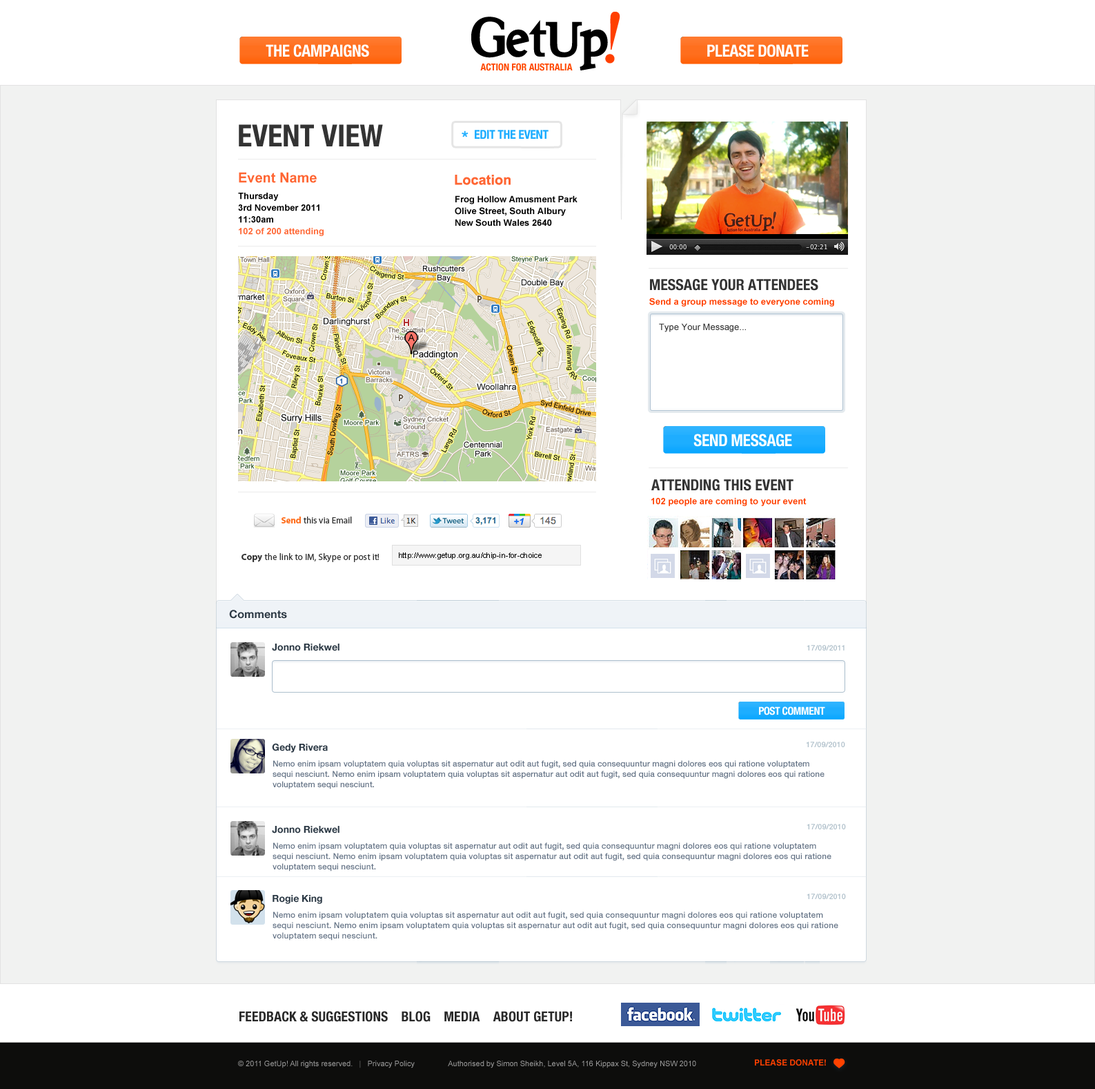
<style>
.page{position:relative;width:1095px;height:1089px;background:#ffffff}
.page>*{position:absolute;margin:0}
.t1{font:16.6px "HelveticaNeue-CondensedBold";letter-spacing:-0.025em;color:#ffffff;text-transform:uppercase}
.t2{font:9.7px "HelveticaNeue-CondensedBold";color:#ff4800;text-transform:uppercase}
.t3{font:30.4px "HelveticaNeue-CondensedBold";color:#333333;text-transform:uppercase}
.t4{font:16.6px "HelveticaNeue-CondensedBold";letter-spacing:-0.025em;color:#26b0ff;text-transform:uppercase}
.t5{font:12.4px "HelveticaNeue-CondensedBold";letter-spacing:-0.025em;color:#1eadff;text-transform:uppercase}
.t6{font:9px/11.7px "Arial-BoldMT";color:#000000}
.t7{font:13.8px "Arial-BoldMT";color:#ff6633}
.t8{font:9px/16.6px "Arial-BoldMT";color:#000000}
.t9{font:9px/11.7px "Arial-BoldMT";color:#ff6633}
.t10{font:15.2px "HelveticaNeue-CondensedBold";color:#333333;text-transform:uppercase}
.t11{font:9px "Arial-BoldMT";color:#ff4000}
.t12{font:9px "ArialMT";color:#333333}
.t13{font:9px "MyriadPro-Regular";letter-spacing:0.01em;color:#333333}
.t14{font:9px "MyriadPro-Bold";letter-spacing:0.01em;color:#ff6f1e}
.t15{font:9px "MyriadPro-Bold";letter-spacing:0.01em;color:#333333}
.t16{font:7.6px "ArialMT";letter-spacing:0.01em;color:#000000}
.t17{font:11px "HelveticaNeue-Bold";color:#2c3945}
.t18{font:9.7px "HelveticaNeue-Bold";color:#2c3945}
.t19{font:7.6px "HelveticaNeue-Medium";color:#acbdc8}
.t20{font:10.8px "HelveticaNeue-CondensedBold";letter-spacing:-0.025em;color:#ffffff;text-transform:uppercase}
.t21{font:8.3px/10.4px "HelveticaNeue-Medium";color:#627184}
.t22{font:13.8px "HelveticaNeue-CondensedBold";color:#292929;text-transform:uppercase}
.t23{font:7.6px "ArialMT";color:#999999}
.t24{font:7.6px "ArialMT";color:#666666}
.t25{font:8.3px "Arial-BoldMT";color:#ff4000;text-transform:uppercase}
</style>
<div class="page">
<p class="t1" style="left:266px;top:44px;width:103px;height:13px">The campaigns</p>
<p class="t1" style="left:708px;top:44px;width:101px;height:13px">Please Donate</p>
<p class="t2" style="left:480px;top:63px;width:93px;height:8px">Action for Australia</p>
<p class="t3" style="left:239px;top:124px;width:144px;height:22px">event view</p>
<p class="t4" style="left:462px;top:130px;width:7px;height:7px">*</p>
<p class="t5" style="left:475px;top:130px;width:74px;height:9px">edit the event</p>
<p class="t6" style="left:238px;top:172px;width:86px;height:64px"><span class="t7">Event Name<br></span><span class="t8">Thursday<br></span>3rd November 2011<br>11:30am<br><span class="t9">102 of 200 attending</span></p>
<p class="t7" style="left:455px;top:175px;width:56px;height:10px">Location</p>
<p class="t6" style="left:455px;top:195px;width:123px;height:31px">Frog Hollow Amusment Park<br>Olive Street, South Albury<br>New South Wales 2640</p>
<p class="t10" style="left:650px;top:279px;width:169px;height:12px">message your attendees</p>
<p class="t11" style="left:650px;top:298px;width:185px;height:8px">Send a group message to everyone coming</p>
<p class="t12" style="left:659px;top:323px;width:87px;height:9px">Type Your Message...</p>
<p class="t1" style="left:694px;top:433px;width:98px;height:14px">send message</p>
<p class="t10" style="left:652px;top:479px;width:142px;height:12px">ATTENDING this event</p>
<p class="t11" style="left:652px;top:498px;width:155px;height:8px">102 people are coming to your event</p>
<p class="t13" style="left:282px;top:516px;width:70px;height:7px"><span class="t14">Send </span>this via Email</p>
<p class="t13" style="left:242px;top:553px;width:137px;height:9px"><span class="t15">Copy</span> the link to IM, Skype or post it!</p>
<p class="t16" style="left:399px;top:552px;width:143px;height:7px">http://www.getup.org.au/chip-in-for-choice</p>
<p class="t17" style="left:229px;top:609px;width:58px;height:9px">Comments</p>
<p class="t18" style="left:272px;top:643px;width:68px;height:8px">Jonno Riekwel</p>
<p class="t19" style="left:807px;top:645px;width:38px;height:5px">17/09/2011</p>
<p class="t20" style="left:759px;top:706px;width:67px;height:9px">post comment</p>
<p class="t18" style="left:272px;top:743px;width:56px;height:9px">Gedy Rivera</p>
<p class="t19" style="left:806px;top:741px;width:40px;height:6px">17/09/2010</p>
<p class="t21" style="left:273px;top:760px;width:552px;height:29px">Nemo enim ipsam voluptatem quia voluptas sit aspernatur aut odit aut fugit, sed quia consequuntur magni dolores eos qui ratione voluptatem sequi nesciunt. Nemo enim ipsam voluptatem quia voluptas sit aspernatur aut odit aut fugit, sed quia consequuntur magni dolores eos qui ratione voluptatem sequi nesciunt.</p>
<p class="t18" style="left:272px;top:826px;width:68px;height:7px">Jonno Riekwel</p>
<p class="t19" style="left:807px;top:823px;width:39px;height:6px">17/09/2010</p>
<p class="t21" style="left:273px;top:842px;width:559px;height:29px">Nemo enim ipsam voluptatem quia voluptas sit aspernatur aut odit aut fugit, sed quia consequuntur magni dolores eos qui ratione voluptatem sequi nesciunt. Nemo enim ipsam voluptatem quia voluptas sit aspernatur aut odit aut fugit, sed quia consequuntur magni dolores eos qui ratione voluptatem sequi nesciunt.</p>
<p class="t19" style="left:807px;top:893px;width:39px;height:6px">17/09/2010</p>
<p class="t18" style="left:273px;top:895px;width:49px;height:9px">Rogie King</p>
<p class="t21" style="left:273px;top:911px;width:566px;height:29px">Nemo enim ipsam voluptatem quia voluptas sit aspernatur aut odit aut fugit, sed quia consequuntur magni dolores eos qui ratione voluptatem sequi nesciunt. Nemo enim ipsam voluptatem quia voluptas sit aspernatur aut odit aut fugit, sed quia consequuntur magni dolores eos qui ratione voluptatem sequi nesciunt.</p>
<p class="t22" style="left:240px;top:1011px;width:332px;height:11px">feedback &amp; suggestions    blog    Media    about getup!</p>
<p class="t23" style="left:238px;top:1060px;width:458px;height:8px">© 2011 GetUp! All rights reserved.  <span class="t24"> |   </span>Privacy Policy                Authorised by Simon Sheikh, Level 5A, 116 Kippax St, Sydney NSW 2010</p>
<p class="t25" style="left:755px;top:1059px;width:71px;height:7px">please donate!</p>
</div>
